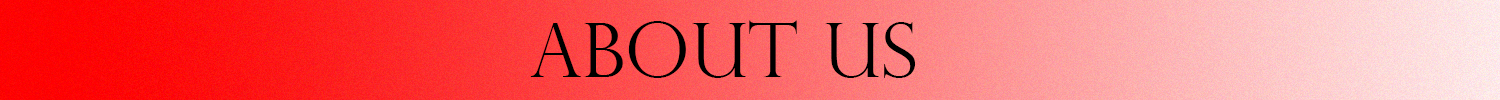
<style>
.page{position:relative;width:1500px;height:100px}
.page>*{position:absolute;margin:0}
.t1{font:75px "PerpetuaTitlingMT-Light";color:#000000}
</style>
<div class="page">
<p class="t1" style="left:530px;top:20px;width:386px;height:58px">About Us</p>
</div>
